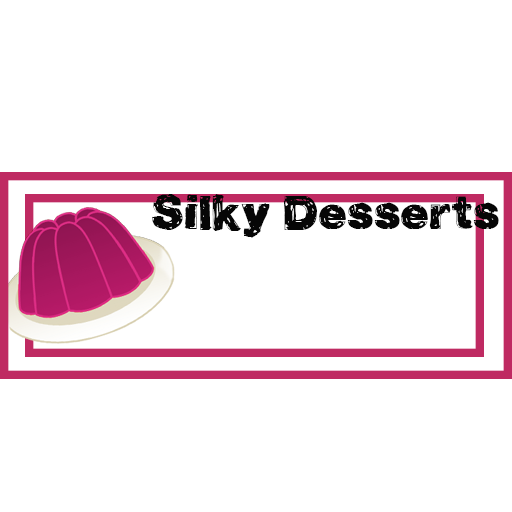
<style>
.page{position:relative;width:512px;height:512px;background:#ffffff}
.page>*{position:absolute;margin:0}
.t1{font:50px "VtksPropriedade";color:#060606}
</style>
<div class="page">
<p class="t1" style="left:152px;top:194px;width:347px;height:44px">Silky Desserts</p>
</div>
